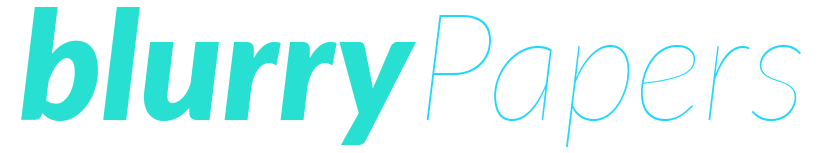
<style>
.page{position:relative;width:823px;height:153px;background:#ffffff}
.page>*{position:absolute;margin:0}
.t1{font:150px "Lato-BlackItalic";color:#28e0d1}
.t2{font:150px "Lato-HairlineItalic";color:#20d7fc}
</style>
<div class="page">
<p class="t1" style="left:21px;top:7px;width:780px;height:140px">blurry<span class="t2">Papers</span></p>
</div>
